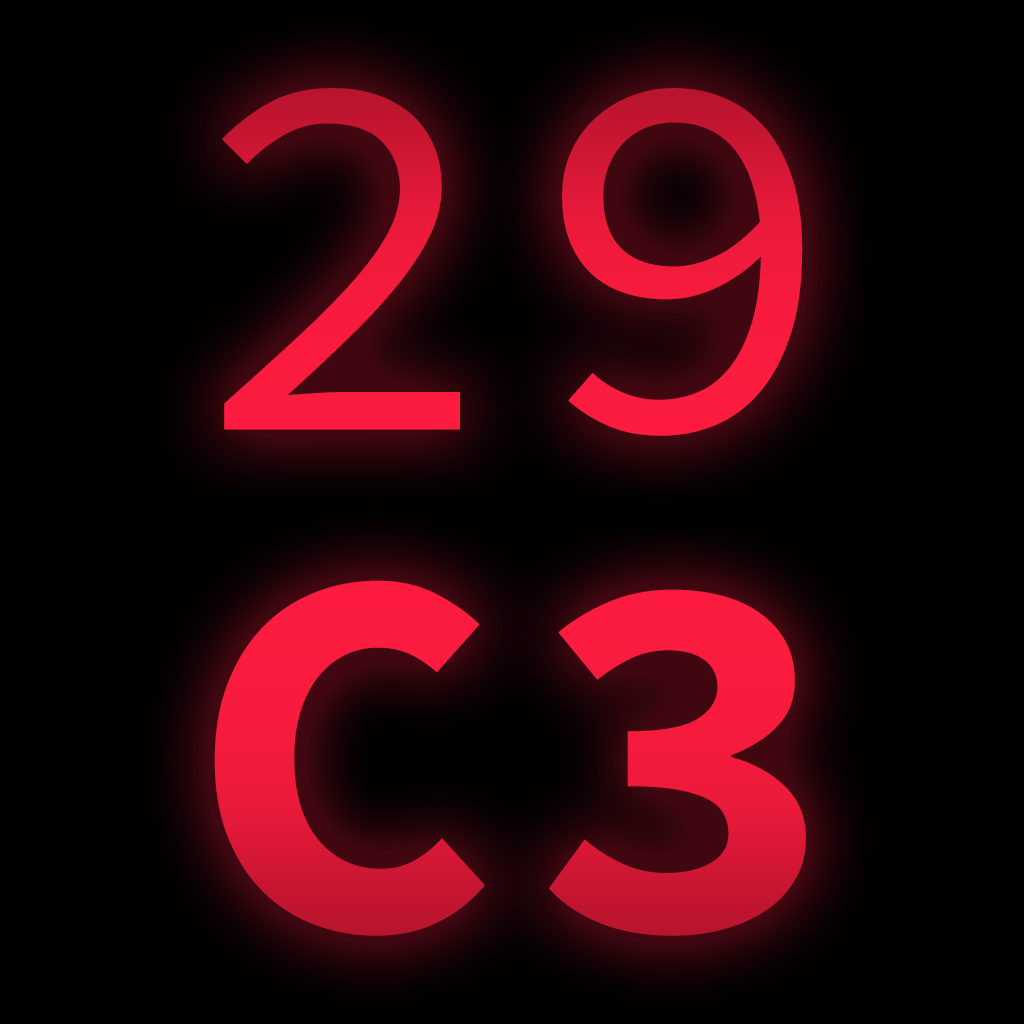
<style>
.page{position:relative;width:1024px;height:1024px;background:#000000}
.page>*{position:absolute;margin:0}
.t1{font:900px/500px "SourceCodePro-Regular";letter-spacing:0.05em;color:#ed1a3b}
.t2{font:900px/500px "SourceCodePro-Bold";letter-spacing:0.05em;color:#ed1a3b}
</style>
<div class="page">
<p class="t1" style="left:214px;top:88px;width:592px;height:848px">29<br><span class="t2">C3</span></p>
</div>
